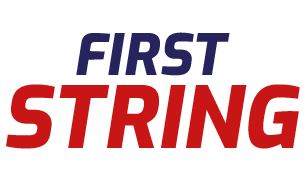
<style>
.page{position:relative;width:305px;height:187px;background:#ffffff}
.page>*{position:absolute;margin:0}
.t1{font:56.7px "Exo-ExtraBoldItalic";color:#26235d}
.t2{font:85px "Exo-ExtraBoldItalic";color:#c81515}
</style>
<div class="page">
<p class="t1" style="left:76px;top:32px;width:154px;height:44px">FIRST</p>
<p class="t2" style="left:6px;top:84px;width:294px;height:65px">STRING</p>
</div>
